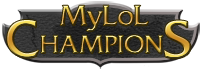
<style>
.page{position:relative;width:201px;height:70px;background:#ffffff}
.page>*{position:absolute;margin:0}
.t1{font:25.8px "FrizQuadrataFont"}
.t2{font:47.7px "FrizQuadrataFont"}
.t3{font:22.8px "FrizQuadrataFont"}
</style>
<div class="page">
<p class="t1" style="left:60px;top:5px;width:89px;height:27px">MyLoL</p>
<p class="t2" style="left:7px;top:20px;width:32px;height:38px">C</p>
<p class="t2" style="left:164px;top:20px;width:27px;height:39px">S</p>
<p class="t3" style="left:41px;top:35px;width:122px;height:19px">HAMPION</p>
</div>
